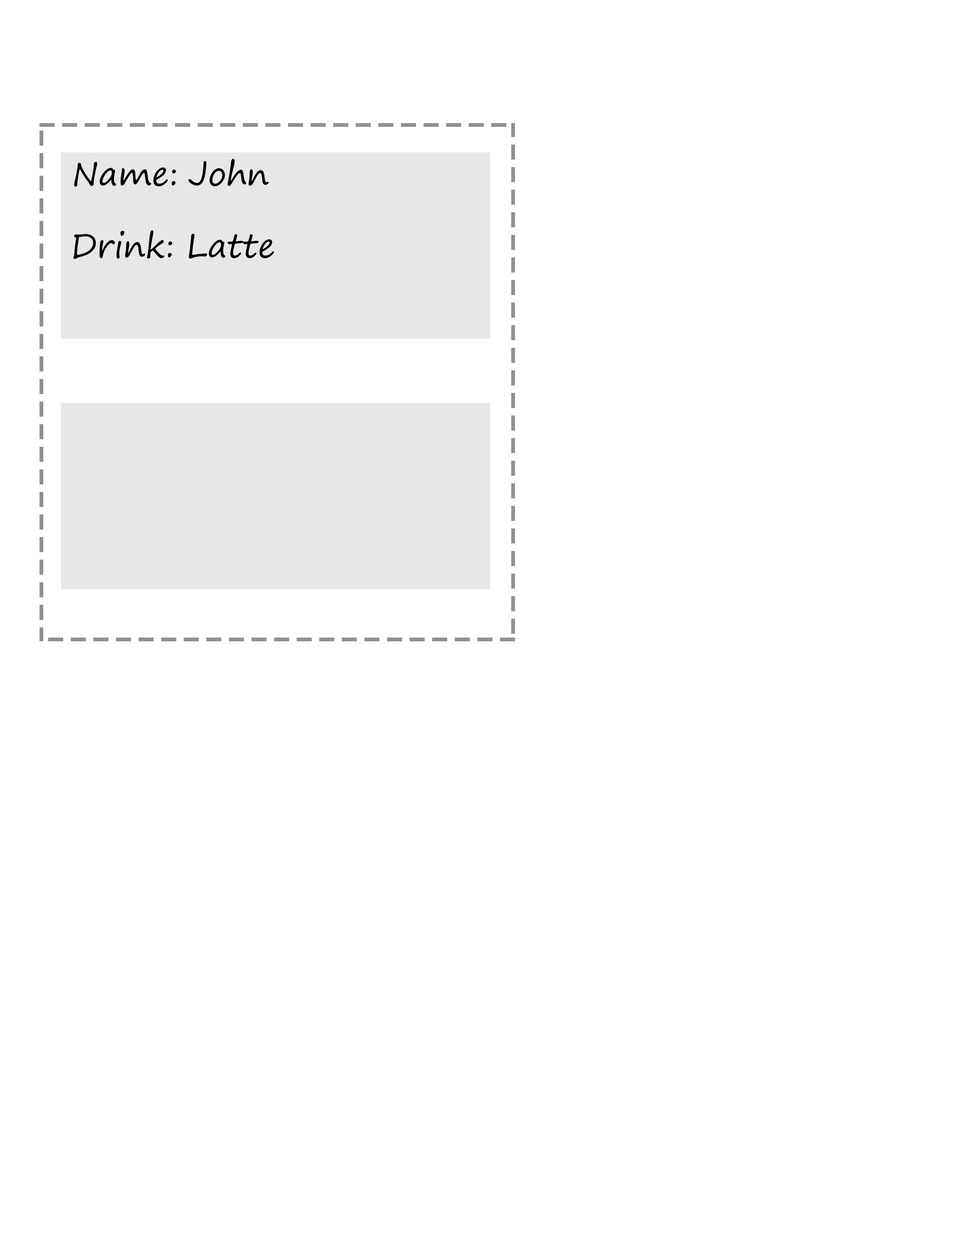
<style>
.page{position:relative;width:960px;height:1242px;background:#ffffff}
.page>*{position:absolute;margin:0}
.t1{font:32.9px "SegoePrint";color:#000000}
</style>
<div class="page">
<p class="t1" style="left:74px;top:162px;width:102px;height:25px">Name:</p>
<p class="t1" style="left:188px;top:159px;width:81px;height:27px">John</p>
<p class="t1" style="left:73px;top:230px;width:99px;height:29px">Drink:</p>
<p class="t1" style="left:189px;top:234px;width:85px;height:25px">Latte</p>
</div>
